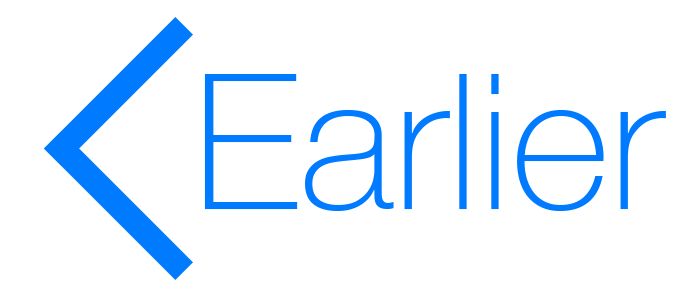
<style>
.page{position:relative;width:700px;height:300px;background:#ffffff}
.page>*{position:absolute;margin:0}
.t1{font:189.1px "HelveticaNeue-Thin";color:#007aff}
</style>
<div class="page">
<p class="t1" style="left:204px;top:74px;width:462px;height:137px">Earlier</p>
</div>
